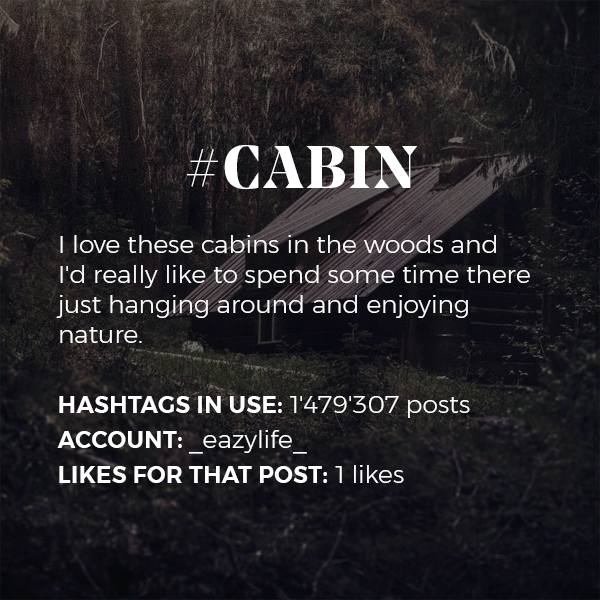
<style>
.page{position:relative;width:600px;height:600px}
.page>*{position:absolute;margin:0}
.t1{font:25px "Montserrat-Light";color:#ffffff}
.t2{font:60px/35px "NoeDisplay-Bold";letter-spacing:0.05em;color:#ffffff;text-transform:uppercase}
.t3{font:23px/35px "Montserrat-SemiBold";letter-spacing:0.02em;color:#ffffff;text-transform:uppercase}
.t4{font:25px/35px "Montserrat-Light";color:#ffffff}
</style>
<div class="page">
<p class="t1" style="left:56px;top:145px;width:474px;height:338px;text-align:center"><span class="t2">#cabin<br><br></span>I love these cabins in the woods and <br>I'd really like to spend some time there just hanging around and enjoying nature.<br><br><span class="t3">Hashtags in use:</span><span class="t4"> 1'479'307 posts<br></span><span class="t3">Account: </span><span class="t4">_eazylife_<br></span><span class="t3">likes for that post:</span><span class="t4"> 1 likes</span></p>
</div>
